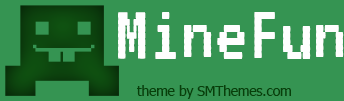
<style>
.page{position:relative;width:344px;height:101px;background:#359452}
.page>*{position:absolute;margin:0}
.t1{font:79.4px "VT323-Regular";color:#fefefe}
.t2{font:13.5px "Tahoma";color:#083f0a}
</style>
<div class="page">
<p class="t1" style="left:118px;top:12px;width:226px;height:47px">MineFun</p>
<p class="t2" style="left:137px;top:85px;width:154px;height:14px">theme by SMThemes.com</p>
</div>
